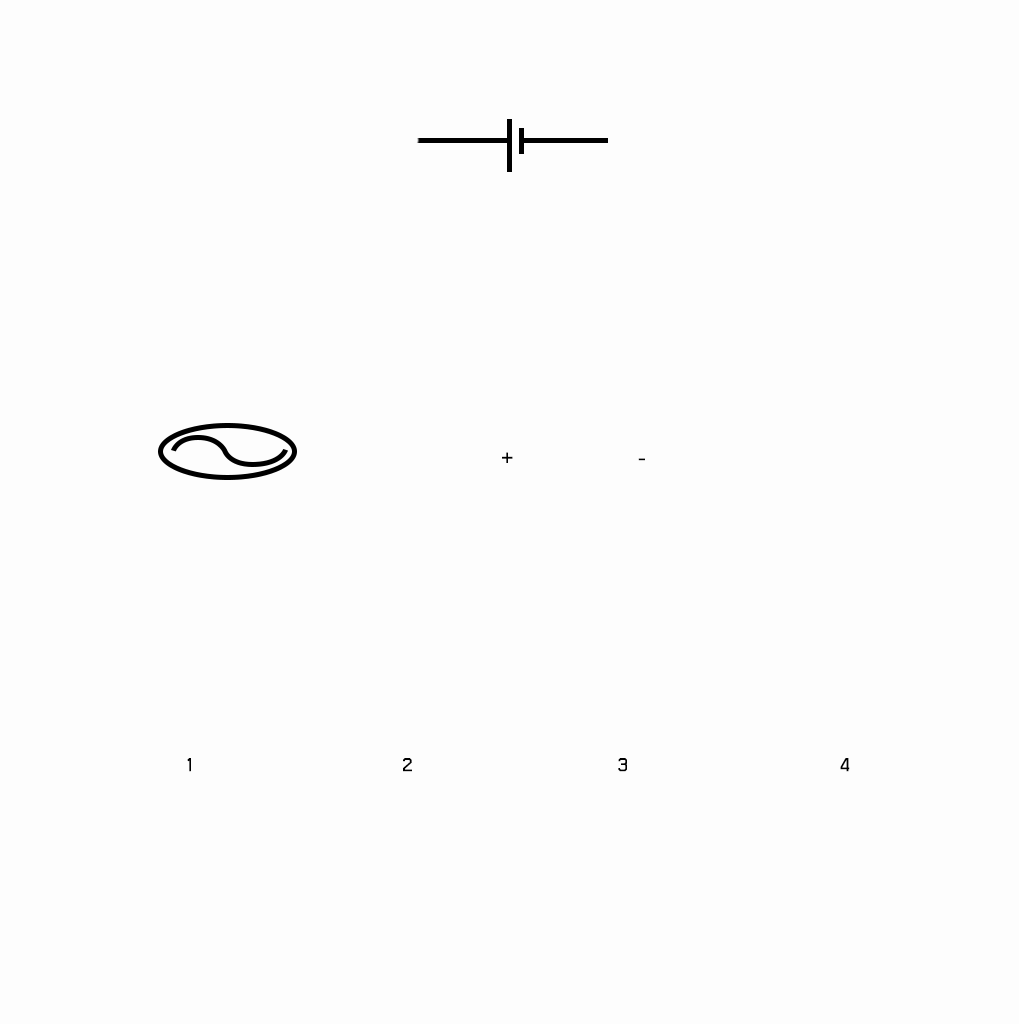
<style>
.page{position:relative;width:1024px;height:1024px;background:#fdfdfd}
.page>*{position:absolute;margin:0}
.t1{font:30px "THChakraPetch-Bold";color:#000000}
</style>
<div class="page">
<p class="t1" style="left:502px;top:452px;width:143px;height:11px">+       -</p>
<p class="t1" style="left:187px;top:758px;width:663px;height:14px">1      2                            3                             4</p>
</div>
